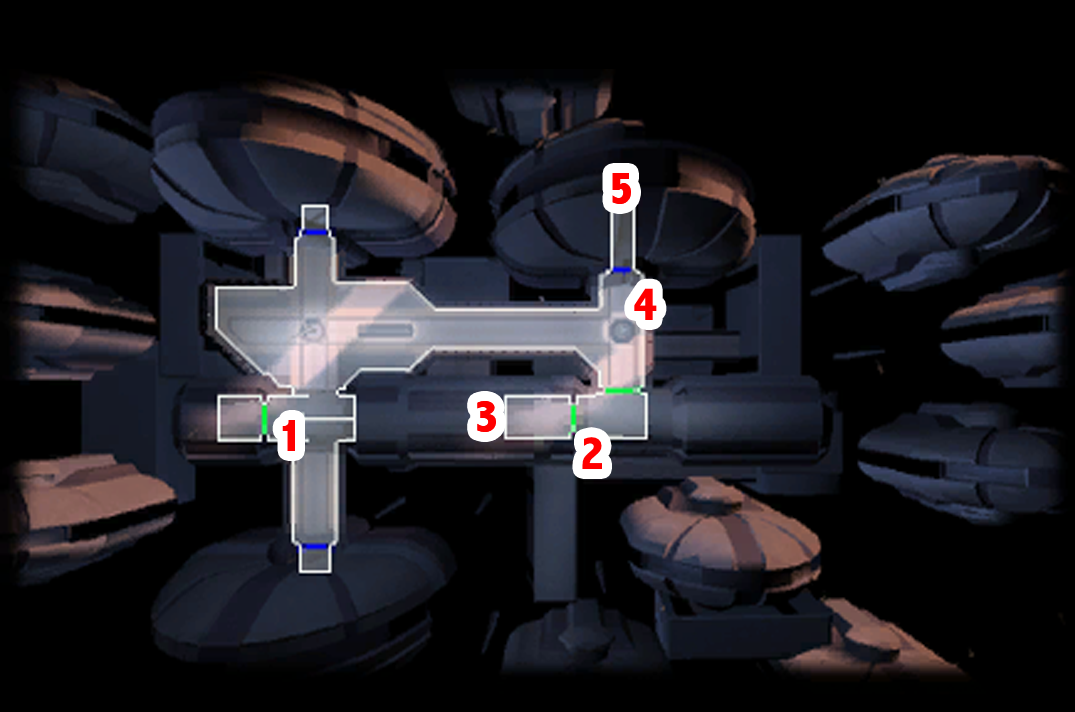
<style>
.page{position:relative;width:1075px;height:712px;background:#000000}
.page>*{position:absolute;margin:0}
.t1{font:48px "AbadiMT-CondensedExtraBold";color:#ff0000}
</style>
<div class="page">
<p class="t1" style="left:612px;top:173px;width:19px;height:31px">5</p>
<p class="t1" style="left:634px;top:288px;width:23px;height:32px">4</p>
<p class="t1" style="left:477px;top:401px;width:19px;height:31px">3</p>
<p class="t1" style="left:282px;top:420px;width:13px;height:31px">1</p>
<p class="t1" style="left:582px;top:437px;width:20px;height:32px">2</p>
</div>
